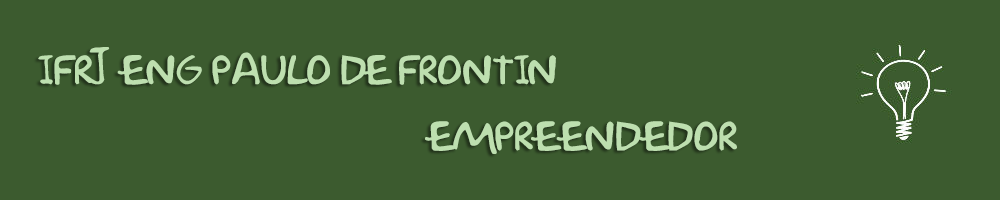
<style>
.page{position:relative;width:1000px;height:200px;background:#3c5b2f}
.page>*{position:absolute;margin:0}
.t1{font:36px "OriginallycompiledbyJonBernhardt.";color:#bddfaf}
.t2{font:36px "OriginallycompiledbyJonBernhardt.";letter-spacing:0.004em;color:#bddfaf}
</style>
<div class="page">
<p class="t1" style="left:38px;top:47px;width:518px;height:38px">IFRJ ENG PAULO DE FRONTIN</p>
<p class="t2" style="left:425px;top:121px;width:312px;height:33px">EMPREENDEDOR</p>
</div>
